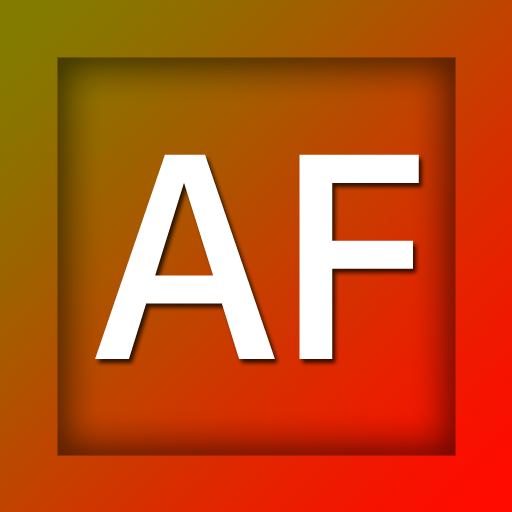
<style>
.page{position:relative;width:512px;height:512px}
.page>*{position:absolute;margin:0}
.t1{font:250px "OPPOSans-B";color:#ffffff}
</style>
<div class="page">
<p class="t1" style="left:95px;top:154px;width:324px;height:205px">AF</p>
</div>
